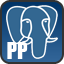
<style>
.page{position:relative;width:64px;height:64px}
.page>*{position:absolute;margin:0}
.t1{font:21px "Impact";color:#ffffff}
</style>
<div class="page">
<p class="t1" style="left:7px;top:42px;width:21px;height:17px">PP</p>
</div>
